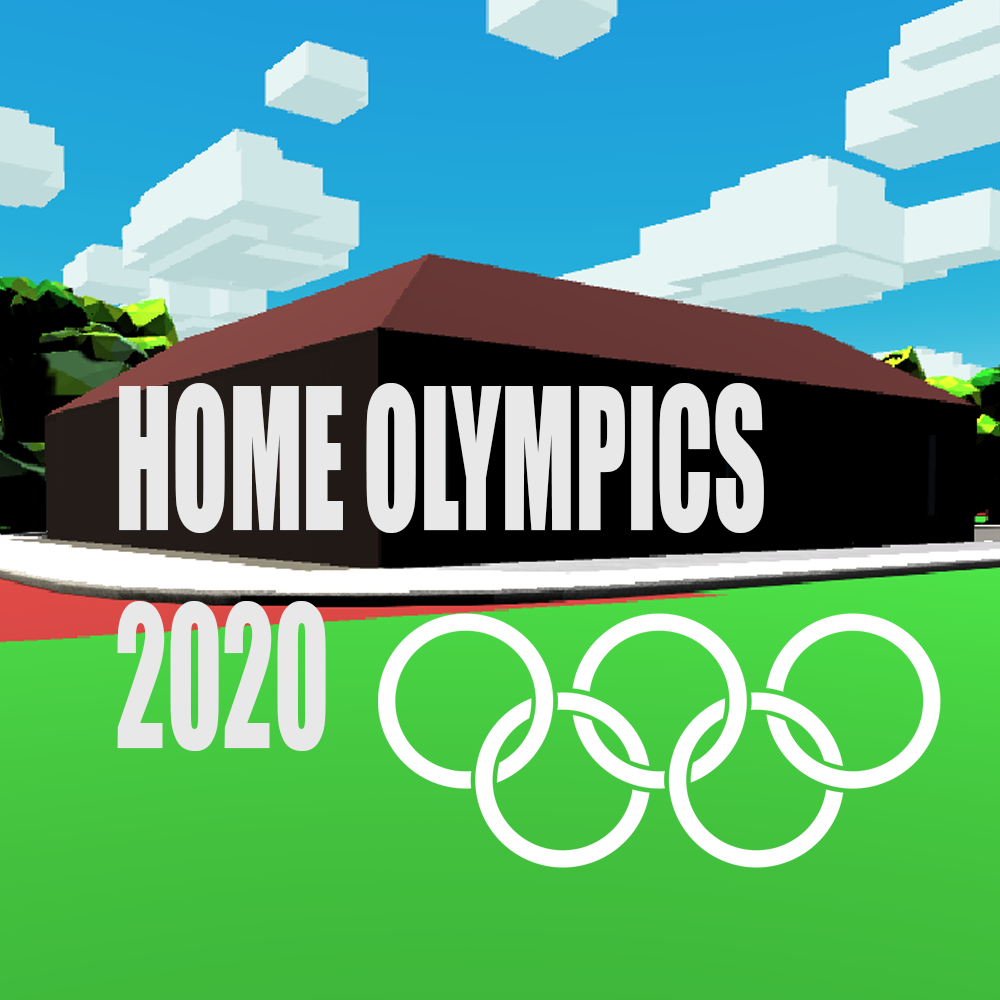
<style>
.page{position:relative;width:1000px;height:1000px}
.page>*{position:absolute;margin:0}
.t1{font:181.8px "Impact";color:#e8e8e8;scale:0.57 1}
</style>
<div class="page">
<p class="t1" style="left:117px;top:383px;width:647px;height:368px">HOME OLYMPICS <br>2020</p>
</div>
